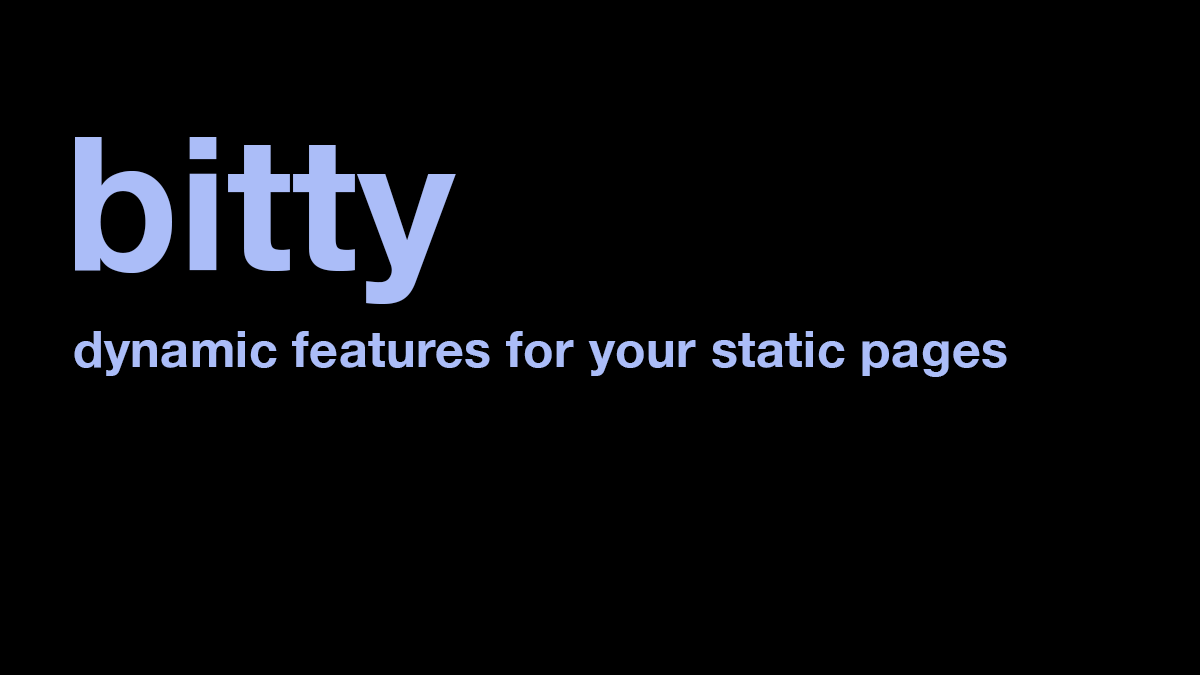
<style>
.page{position:relative;width:1200px;height:675px;background:#000000}
.page>*{position:absolute;margin:0}
.t1{font:186px "HelveticaNeue-Bold";color:#abbdf8}
.t2{font:50px "HelveticaNeue-Bold";letter-spacing:0.01em;color:#abbdf8}
</style>
<div class="page">
<p class="t1" style="left:75px;top:137px;width:381px;height:167px">bitty</p>
<p class="t2" style="left:74px;top:331px;width:933px;height:46px">dynamic features for your static pages</p>
</div>
